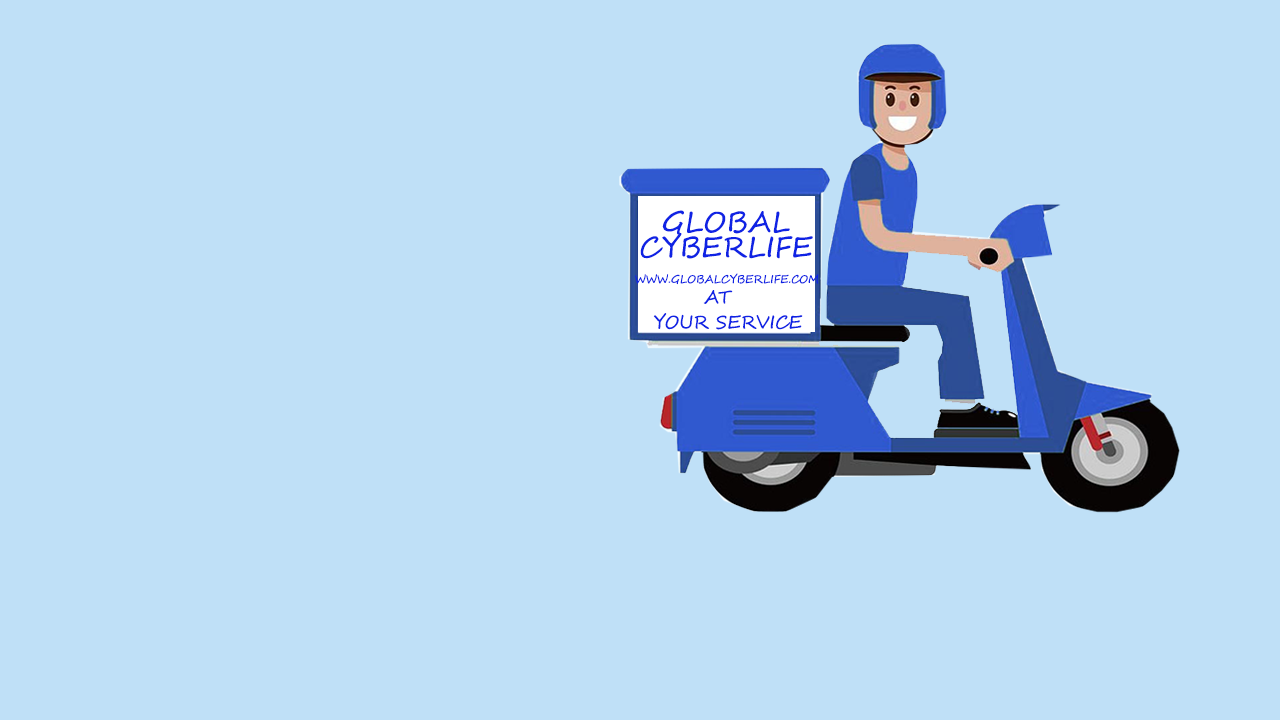
<style>
.page{position:relative;width:1280px;height:720px;background:#bfe0f7}
.page>*{position:absolute;margin:0}
.t1{font:28.2px/25.1px "SegoeScript";color:#0f23e4;text-transform:uppercase}
.t2{font:11px "SegoeScript";color:#0f23e4;text-transform:uppercase}
.t3{font:18px/25.1px "SegoeScript";color:#0f23e4;text-transform:uppercase}
</style>
<div class="page">
<p class="t1" style="left:640px;top:210px;width:173px;height:49px">global   <br>cyberlife</p>
<p class="t2" style="left:635px;top:273px;width:184px;height:12px">www.globalcyberlife.com</p>
<p class="t3" style="left:653px;top:290px;width:150px;height:40px">at <br>your service</p>
</div>
